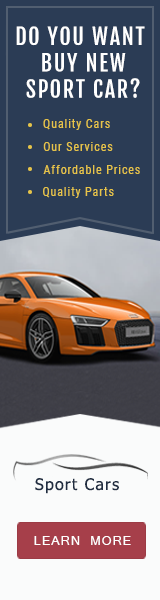
<style>
.page{position:relative;width:160px;height:600px;background:#2b3c55}
.page>*{position:absolute;margin:0}
.t1{font:22px "FjallaOne-Regular";letter-spacing:0.075em;color:#ffffff}
.t2{font:12px "RobotoCondensed-Regular";letter-spacing:0.075em;color:#e6c449}
.t3{font:16px "Tahoma";letter-spacing:0.075em;color:#202d41}
.t4{font:14px "Latha";letter-spacing:0.075em;color:#ffffff}
</style>
<div class="page">
<p class="t1" style="left:16px;top:26px;width:129px;height:72px;text-align:center">DO YOU WANT<br> BUY NEW<br> SPORT CAR?</p>
<p class="t2" style="left:43px;top:119px;width:67px;height:11px">Quality Cars</p>
<p class="t2" style="left:43px;top:142px;width:70px;height:9px">Our Services</p>
<p class="t2" style="left:43px;top:165px;width:97px;height:9px">Affordable Prices</p>
<p class="t2" style="left:43px;top:187px;width:71px;height:11px">Quality Parts</p>
<p class="t3" style="left:35px;top:478px;width:84px;height:16px">Sport Cars</p>
<p class="t4" style="left:34px;top:536px;width:97px;height:9px">LEARN MORE</p>
</div>
